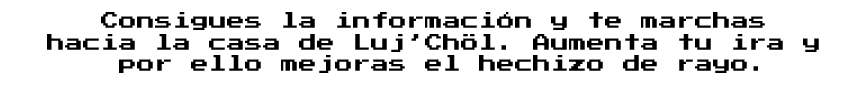
<style>
.page{position:relative;width:861px;height:85px;background:#ffffff}
.page>*{position:absolute;margin:0}
.t1{font:18px "PressStart2P";color:#000000}
</style>
<div class="page">
<p class="t1" style="left:47px;top:12px;width:772px;height:61px;text-align:center">Consigues la información y te marchas <br>hacia la casa de Luj’Chöl. Aumenta tu ira y <br>por ello mejoras el hechizo de rayo.</p>
</div>
